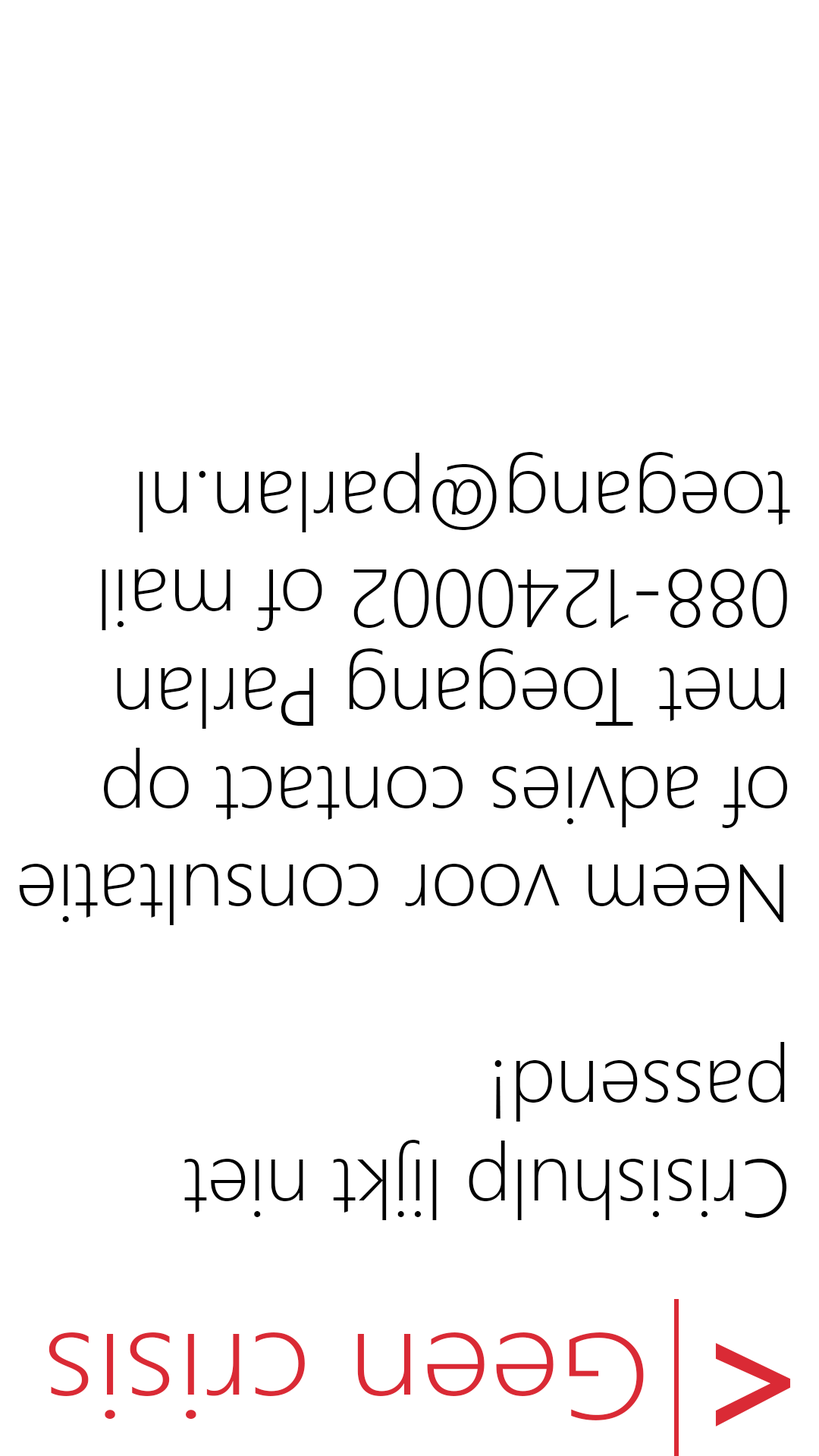
<style>
.page{position:relative;width:819px;height:1456px;background:#ffffff}
.page>*{position:absolute;margin:0}
.t1{font:81.9px "SegoeUI-Light";color:#000000}
.t2{font:121.3px "SegoeUI-Light";color:#da2a35;scale:1.13 1}
.t3{font:170.8px "SegoeUI-Semibold";color:#da2a35}
</style>
<div class="page">
<p class="t1" style="left:19px;top:452px;width:771px;height:768px;rotate:180deg">Crisishulp lijkt niet <br>passend!<br><br>Neem voor consultatie<br>of advies contact op <br>met Toegang Parlan<br>088-1240002 of mail <br>toegang@parlan.nl</p>
<p class="t2" style="left:49px;top:1332px;width:595px;height:88px;rotate:180deg">Geen crisis</p>
<p class="t3" style="left:715px;top:1343px;width:76px;height:83px;rotate:180deg">&lt;</p>
</div>
